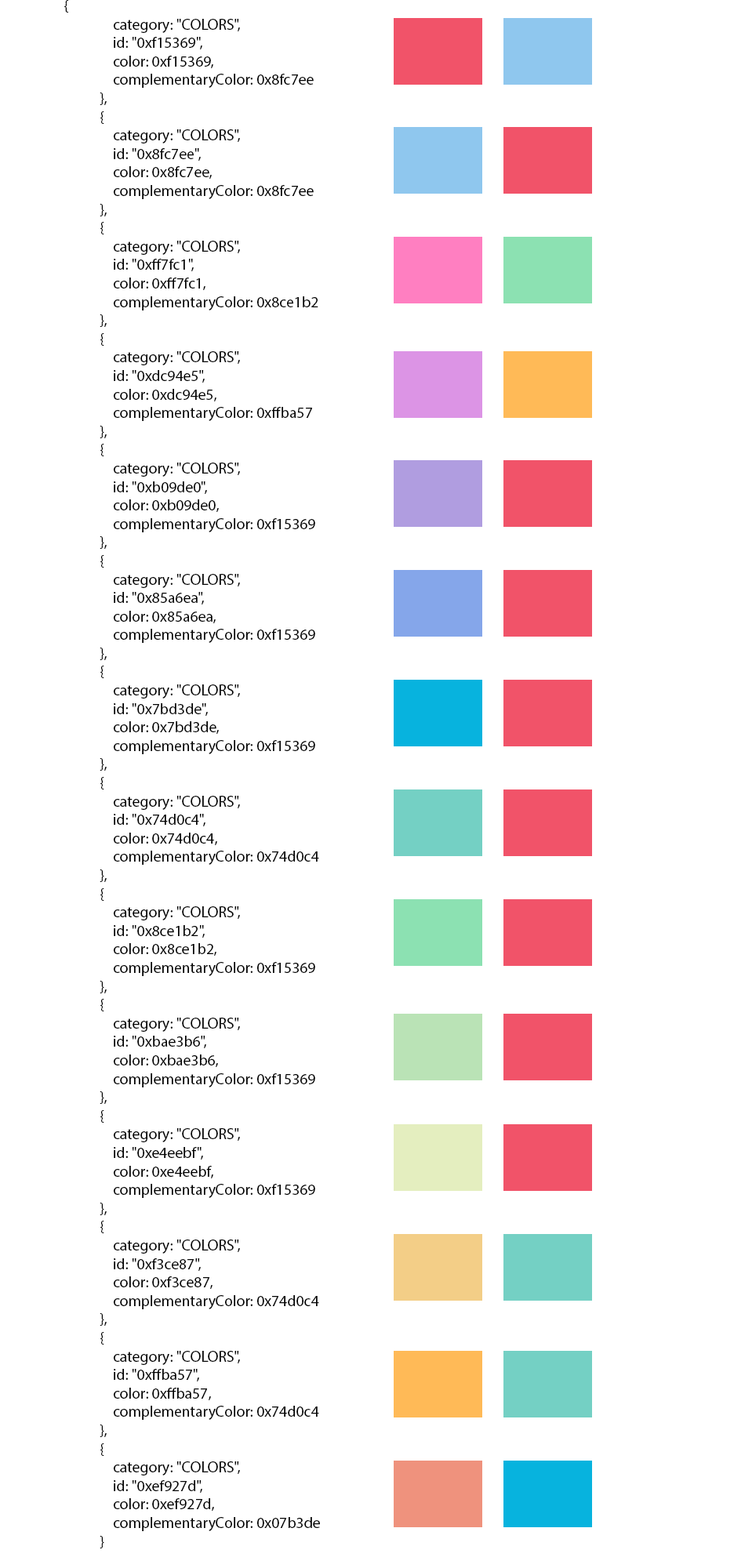
<style>
.page{position:relative;width:734px;height:1568px;background:#ffffff}
.page>*{position:absolute;margin:0}
.t1{font:15.4px "MyriadPro-Regular";color:#000000}
</style>
<div class="page">
<p class="t1" style="left:64px;top:0px;width:256px;height:1548px">{<br>                category: "COLORS",<br>                id: "0xf15369",<br>                color: 0xf15369,<br>                complementaryColor: 0x8fc7ee<br>            },<br>            {<br>                category: "COLORS",<br>                id: "0x8fc7ee",<br>                color: 0x8fc7ee,<br>                complementaryColor: 0x8fc7ee<br>            },<br>            {<br>                category: "COLORS",<br>                id: "0xff7fc1",<br>                color: 0xff7fc1,<br>                complementaryColor: 0x8ce1b2<br>            },<br>            {<br>                category: "COLORS",<br>                id: "0xdc94e5",<br>                color: 0xdc94e5,<br>                complementaryColor: 0xffba57<br>            },<br>            {<br>                category: "COLORS",<br>                id: "0xb09de0",<br>                color: 0xb09de0,<br>                complementaryColor: 0xf15369<br>            },<br>            {<br>                category: "COLORS",<br>                id: "0x85a6ea",<br>                color: 0x85a6ea,<br>                complementaryColor: 0xf15369<br>            },<br>            {<br>                category: "COLORS",<br>                id: "0x7bd3de",<br>                color: 0x7bd3de,<br>                complementaryColor: 0xf15369<br>            },<br>            {<br>                category: "COLORS",<br>                id: "0x74d0c4",<br>                color: 0x74d0c4,<br>                complementaryColor: 0x74d0c4<br>            },<br>            {<br>                category: "COLORS",<br>                id: "0x8ce1b2",<br>                color: 0x8ce1b2,<br>                complementaryColor: 0xf15369<br>            },<br>            {<br>                category: "COLORS",<br>                id: "0xbae3b6",<br>                color: 0xbae3b6,<br>                complementaryColor: 0xf15369<br>            },<br>            {<br>                category: "COLORS",<br>                id: "0xe4eebf",<br>                color: 0xe4eebf,<br>                complementaryColor: 0xf15369<br>            },<br>            {<br>                category: "COLORS",<br>                id: "0xf3ce87",<br>                color: 0xf3ce87,<br>                complementaryColor: 0x74d0c4<br>            },<br>            {<br>                category: "COLORS",<br>                id: "0xffba57",<br>                color: 0xffba57,<br>                complementaryColor: 0x74d0c4<br>            },<br>            {<br>                category: "COLORS",<br>                id: "0xef927d",<br>                color: 0xef927d,<br>                complementaryColor: 0x07b3de<br>            }</p>
</div>
